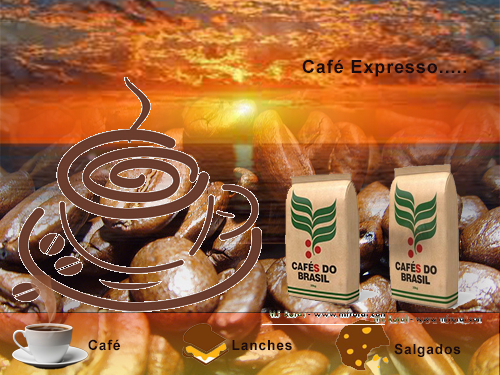
<style>
.page{position:relative;width:500px;height:375px}
.page>*{position:absolute;margin:0}
.t1{font:18px "Arial-BoldMT";letter-spacing:0.05em;color:#1b0b0f}
.t2{font:14px "Arial-BoldMT";letter-spacing:0.05em;color:#1b0b0f}
</style>
<div class="page">
<p class="t1" style="left:302px;top:59px;width:164px;height:18px">Café Expresso.....</p>
<p class="t2" style="left:88px;top:339px;width:32px;height:12px">Café</p>
<p class="t2" style="left:232px;top:340px;width:60px;height:11px">Lanches</p>
<p class="t2" style="left:394px;top:343px;width:67px;height:14px">Salgados</p>
</div>
